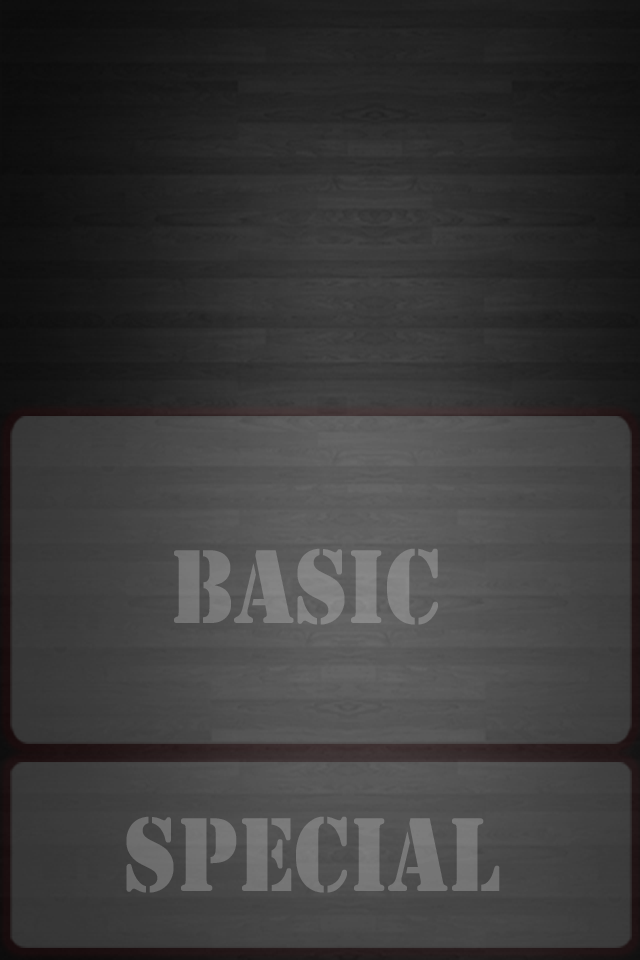
<style>
.page{position:relative;width:640px;height:960px}
.page>*{position:absolute;margin:0}
.t1{font:109.3px "Stencil";color:#818181;scale:0.88 1}
.t2{font:109.4px "Stencil";color:#757575;scale:0.88 1}
</style>
<div class="page">
<p class="t1" style="left:174px;top:548px;width:264px;height:77px">BASIC</p>
<p class="t2" style="left:126px;top:816px;width:374px;height:77px">SPECIAL</p>
</div>
